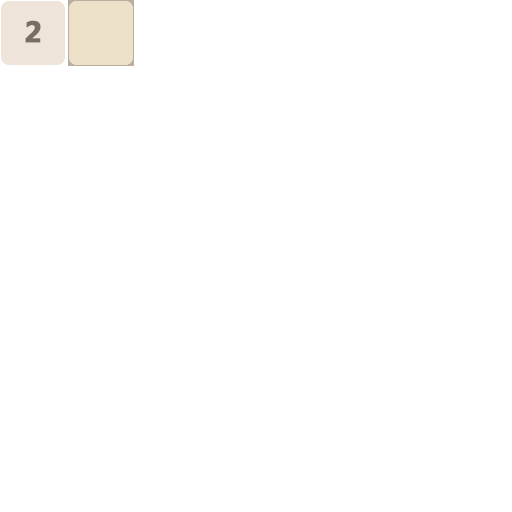
<style>
.page{position:relative;width:512px;height:512px;background:#ffffff}
.page>*{position:absolute;margin:0}
.t1{font:30px "MicrosoftNewTaiLue-Bold";letter-spacing:0.04em;color:#776e65;font-weight:bold}
</style>
<div class="page">
<p class="t1" style="left:25px;top:20px;width:16px;height:23px">2</p>
</div>
